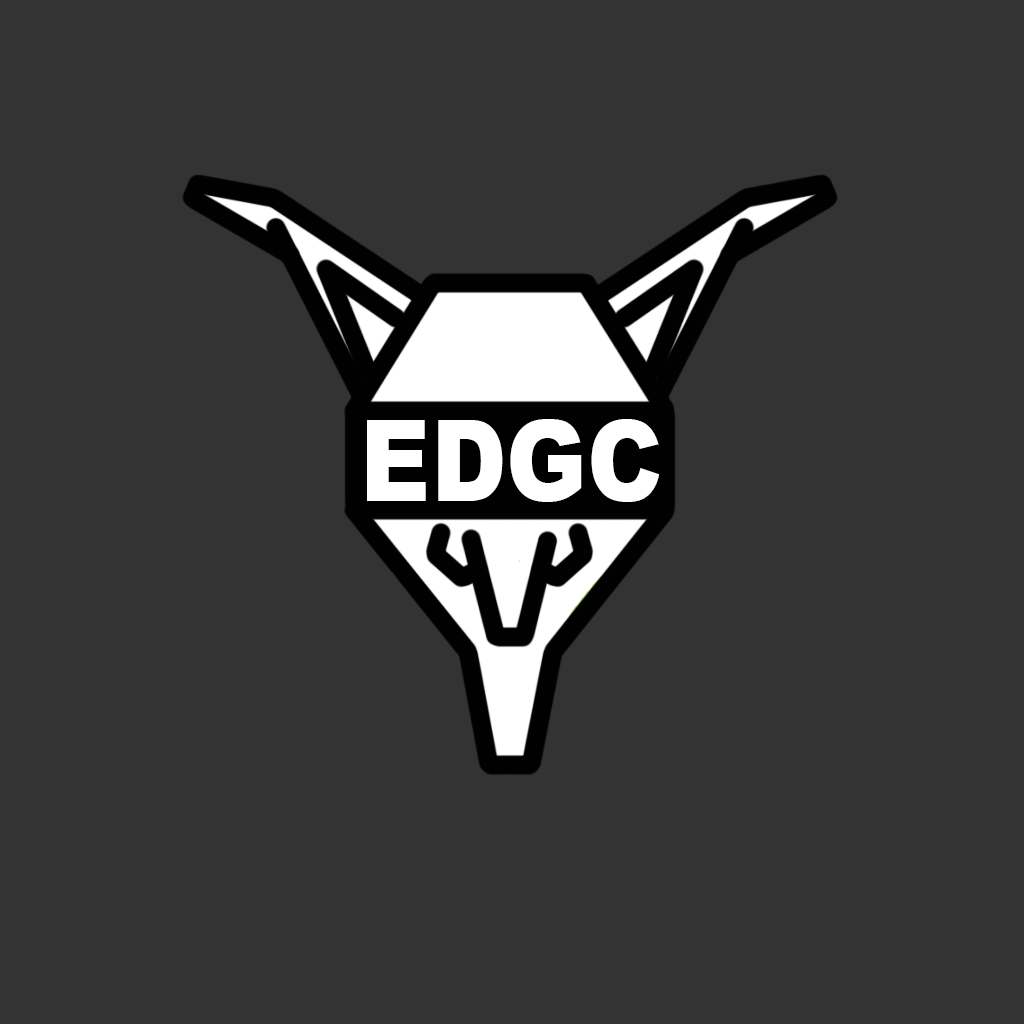
<style>
.page{position:relative;width:1024px;height:1024px;background:#333333}
.page>*{position:absolute;margin:0}
.t1{font:113.2px "Arial-Black";color:#ffffff;scale:0.86 1}
</style>
<div class="page">
<p class="t1" style="left:367px;top:419px;width:292px;height:83px">EDGC</p>
</div>
